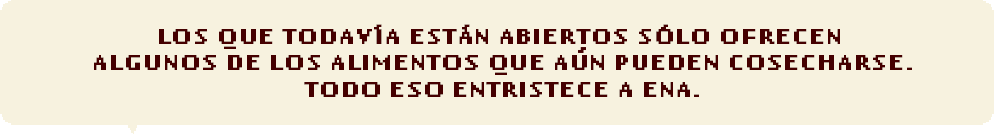
<style>
.page{position:relative;width:994px;height:134px;background:#f7f2df}
.page>*{position:absolute;margin:0}
.t1{font:22px "FedraNine-Bold";letter-spacing:-0.005em;color:#450000;text-transform:uppercase}
</style>
<div class="page">
<p class="t1" style="left:94px;top:24px;width:818px;height:73px;text-align:center">los que todavía están abiertos sólo ofrecen <br>algunos de los alimentos que aun pueden cosecharse.<br>todo eso entristece a Ena.</p>
</div>
